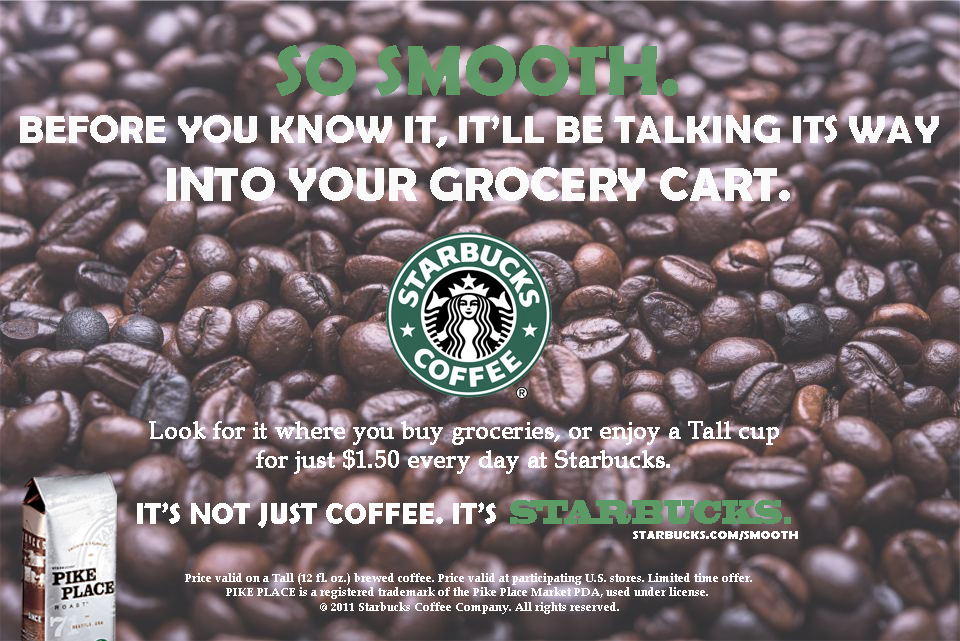
<style>
.page{position:relative;width:960px;height:641px}
.page>*{position:absolute;margin:0}
.t1{font:40px "BerlinSansFBDemi-Bold";color:#fdfdfd}
.t2{font:72px "BerlinSansFBDemi-Bold";color:#5e9b66}
.t3{font:48px "BerlinSansFBDemi-Bold";color:#fdfdfd}
.t4{font:24px "BookAntiqua";color:#fdfdfd;font-weight:bold}
.t5{font:30px "BerlinSansFBDemi-Bold";color:#fdfdfd}
.t6{font:31.5px "BlackoakStd";letter-spacing:-0.05em;color:#5d9b66;scale:0.57 1}
.t7{font:31.5px "BlackoakStd";letter-spacing:-0.004em;color:#5d9b66;scale:0.57 1}
.t8{font:12px "BerlinSansFBDemi-Bold";color:#fdfdfd;font-weight:bold}
.t9{font:12px "BookAntiqua-Bold";color:#fafbfa}
</style>
<div class="page">
<p class="t1" style="left:20px;top:45px;width:919px;height:156px;text-align:center;opacity:0.97"><span class="t2">SO SMOOTH.<br></span>BEFORE YOU KNOW IT, IT’LL BE TALKING ITS WAY<br><span class="t3">INTO YOUR GROCERY CART.</span></p>
<p class="t4" style="left:137px;top:421px;width:661px;height:119px;text-align:center">Look for it where you buy groceries, or enjoy a Tall cup<br>for just $1.50 every day at Starbucks.<br><span class="t5">IT’S NOT JUST COFFEE. IT’S </span><span class="t6">S</span><span class="t7">T</span><span class="t6">ARBUCKS.<br></span><span class="t8">              STARBUCKS.COM/SMOOTH</span></p>
<p class="t9" style="left:185px;top:573px;width:567px;height:41px;text-align:center">Price valid on a Tall (12 fl. oz.) brewed coffee. Price valid at participating U.S. stores. Limited time offer.<br>PIKE PLACE is a registered trademark of the Pike Place Market PDA, used under license. <br>@ 2011 Starbucks Coffee Company. All rights reserved.</p>
</div>
